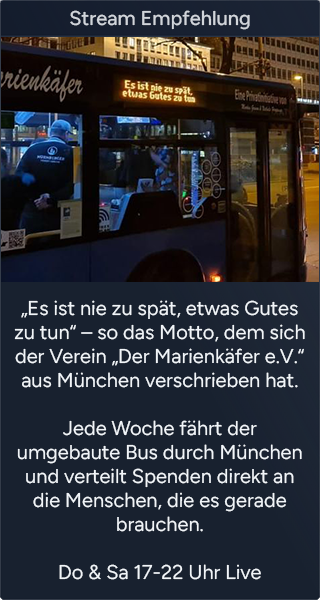
<style>
.page{position:relative;width:320px;height:600px;background:#18212f}
.page>*{position:absolute;margin:0}
.t1{font:20px "FigtreeLight-Medium";color:#d1d5db}
.t2{font:20px "FigtreeLight-Regular";color:#f1f5f9}
</style>
<div class="page">
<p class="t1" style="left:70px;top:10px;width:180px;height:20px">Stream Empfehlung</p>
<p class="t2" style="left:14px;top:300px;width:291px;height:280px;text-align:center">„Es ist nie zu spät, etwas Gutes zu tun“ – so das Motto, dem sich der Verein „Der Marienkäfer e.V.“ aus München verschrieben hat. <br> <br>Jede Woche fährt der umgebaute Bus durch München und verteilt Spenden direkt an die Menschen, die es gerade brauchen.<br><br>Do &amp; Sa 17-22 Uhr Live</p>
</div>
